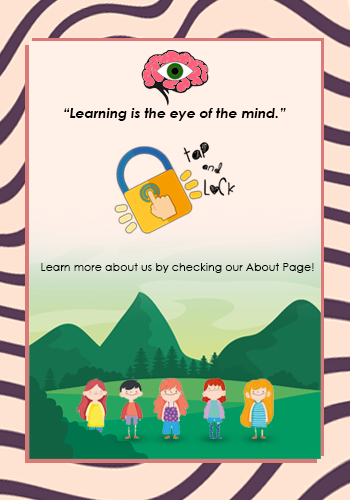
<style>
.page{position:relative;width:350px;height:500px;background:#fff0e8}
.page>*{position:absolute;margin:0}
.t1{font:13.9px "CenturyGothic-BoldItalic";color:#000000}
.t2{font:11.1px "CenturyGothic";color:#000000}
</style>
<div class="page">
<p class="t1" style="left:64px;top:108px;width:222px;height:13px">“Learning is the eye of the mind.”</p>
<p class="t2" style="left:41px;top:263px;width:273px;height:10px">Learn more about us by checking our About Page!</p>
</div>
